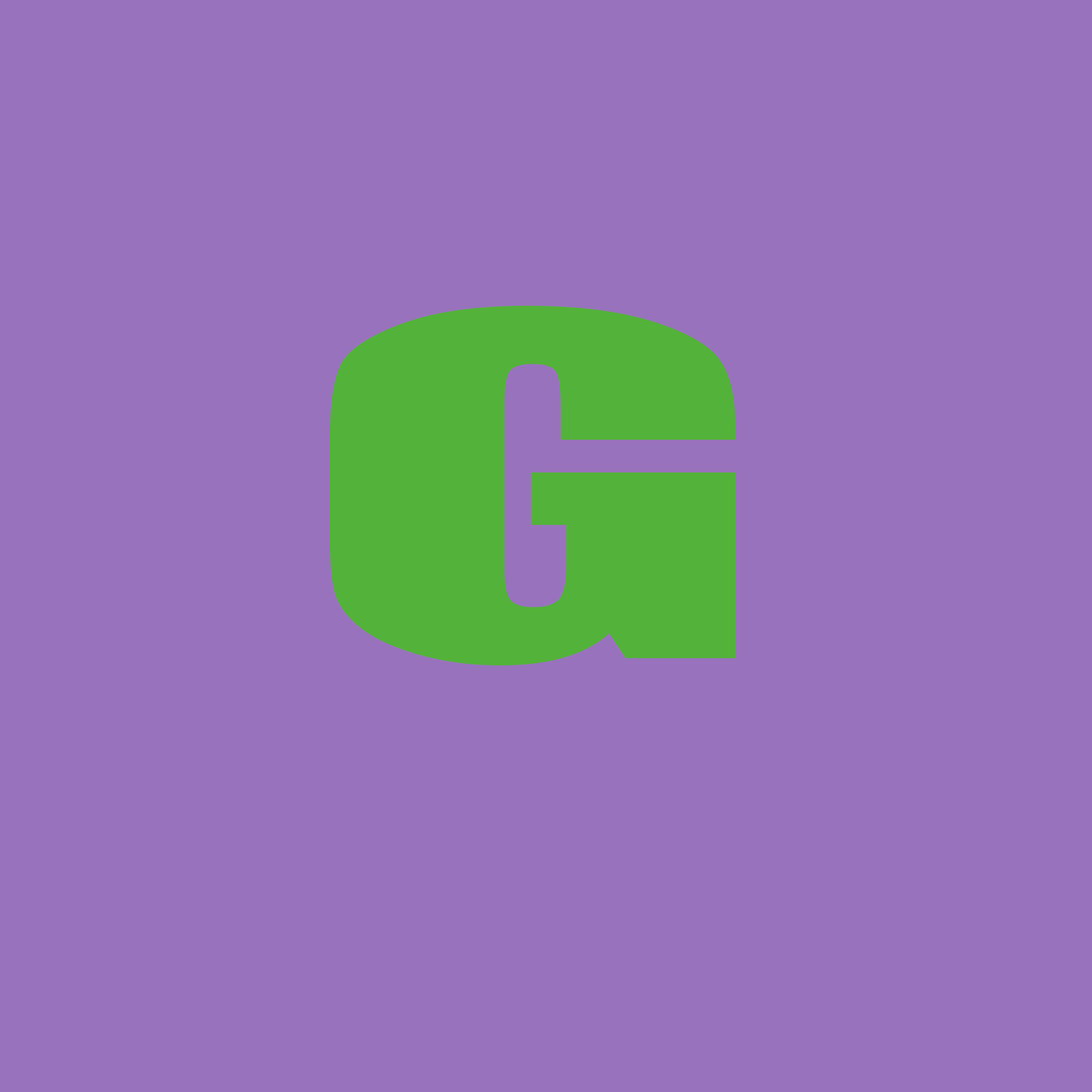
<style>
.page{position:relative;width:1092px;height:1092px;background:#9872bc}
.page>*{position:absolute;margin:0}
.t1{font:393.4px "Impact";color:#53b239;scale:1.94 1}
</style>
<div class="page">
<p class="t1" style="left:329px;top:306px;width:406px;height:359px">G</p>
</div>
